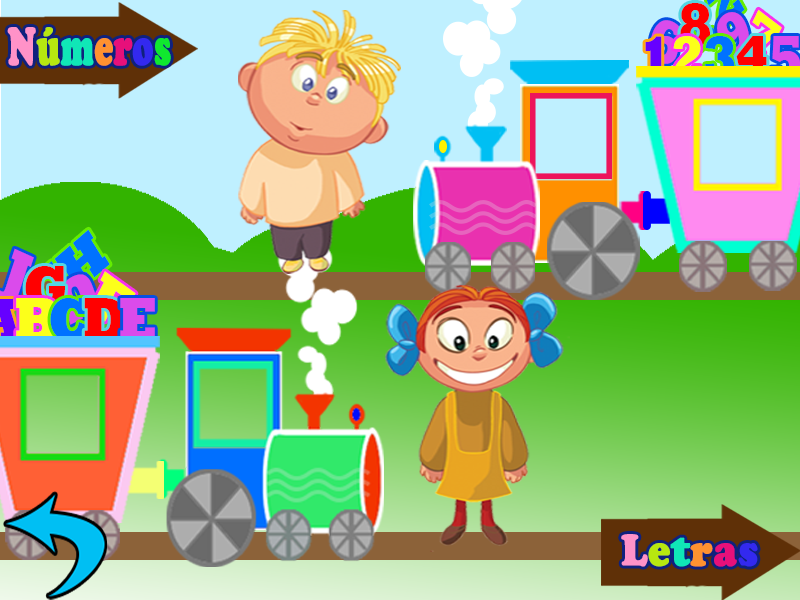
<style>
.page{position:relative;width:800px;height:600px}
.page>*{position:absolute;margin:0}
.t1{font:15px/71.1px "Rockwell-ExtraBold";letter-spacing:-0.05em;color:#ff0000;scale:0.8 1}
.t2{font:14.6px "Rockwell-ExtraBold";letter-spacing:-0.05em;scale:0.86 1}
.t3{font:14.3px "Rockwell-ExtraBold";letter-spacing:-0.05em;scale:0.9 1}
.t4{font:50.9px "CooperBlackStd";color:#ff92c8;font-weight:bold;scale:0.64 1}
.t5{font:50.9px "CooperBlackStd";color:#b7e710;font-weight:bold;scale:0.64 1}
.t6{font:50.9px "CooperBlackStd";color:#10e7b7;font-weight:bold;scale:0.64 1}
.t7{font:50.9px "CooperBlackStd";color:#ff9130;font-weight:bold;scale:0.64 1}
.t8{font:50.9px "CooperBlackStd";color:#e7107a;font-weight:bold;scale:0.64 1}
.t9{font:50.9px "CooperBlackStd";color:#3329ef;font-weight:bold;scale:0.64 1}
.t10{font:50.9px "CooperBlackStd";color:#10e72f;font-weight:bold;scale:0.64 1}
.t11{font:14.7px "Rockwell-ExtraBold";letter-spacing:-0.05em;scale:0.85 1}
.t12{font:15px/71.1px "Rockwell-ExtraBold";letter-spacing:-0.05em;scale:0.8 1}
.t13{font:14.3px "Rockwell-ExtraBold";letter-spacing:-0.05em;scale:0.95 1}
.t14{font:15.1px/71.3px "Rockwell-ExtraBold";letter-spacing:-0.05em;color:#ff0000;scale:0.85 1}
.t15{font:14.5px "Rockwell-ExtraBold";letter-spacing:-0.05em;scale:0.93 1}
.t16{font:15.1px/71.3px "Rockwell-ExtraBold";letter-spacing:-0.05em;color:#fcff1a;scale:0.85 1}
.t17{font:15.1px/71.3px "Rockwell-ExtraBold";letter-spacing:-0.05em;color:#0072ff;scale:0.85 1}
.t18{font:15.1px/71.3px "Rockwell-ExtraBold";letter-spacing:-0.05em;color:#da4beb;scale:0.85 1}
.t19{font:42.7px "CooperBlackStd";color:#ff92c8;font-weight:bold;scale:0.91 1}
.t20{font:42.7px "CooperBlackStd";color:#b7e710;font-weight:bold;scale:0.91 1}
.t21{font:42.7px "CooperBlackStd";color:#10e7b7;font-weight:bold;scale:0.91 1}
.t22{font:42.7px "CooperBlackStd";color:#ff9130;font-weight:bold;scale:0.91 1}
.t23{font:42.7px "CooperBlackStd";color:#e7107a;font-weight:bold;scale:0.91 1}
.t24{font:42.7px "CooperBlackStd";color:#3329ef;font-weight:bold;scale:0.91 1}
</style>
<div class="page">
<p class="t1" style="left:680px;top:3px;width:30px;height:43px">8</p>
<p class="t2" style="left:717px;top:12px;width:32px;height:44px;rotate:152deg">6</p>
<p class="t3" style="left:743px;top:9px;width:39px;height:52px;rotate:37deg">7</p>
<p class="t4" style="left:7px;top:27px;width:164px;height:39px">N<span class="t5">ú</span><span class="t6">m</span><span class="t7">e</span><span class="t8">r</span><span class="t9">o</span><span class="t10">s</span></p>
<p class="t11" style="left:650px;top:20px;width:32px;height:44px;rotate:26deg">6</p>
<p class="t12" style="left:645px;top:36px;width:21px;height:44px">1</p>
<p class="t12" style="left:673px;top:36px;width:28px;height:43px">2</p>
<p class="t12" style="left:705px;top:36px;width:30px;height:43px">3</p>
<p class="t1" style="left:736px;top:36px;width:31px;height:43px">4</p>
<p class="t12" style="left:771px;top:36px;width:30px;height:43px">5</p>
<p class="t13" style="left:27px;top:229px;width:83px;height:85px;rotate:-41deg">GH</p>
<p class="t14" style="left:25px;top:266px;width:40px;height:43px">G</p>
<p class="t15" style="left:86px;top:271px;width:50px;height:51px;rotate:36deg">F</p>
<p class="t16" style="left:16px;top:298px;width:42px;height:43px">B</p>
<p class="t17" style="left:50px;top:298px;width:39px;height:43px">C</p>
<p class="t14" style="left:84px;top:298px;width:42px;height:43px">D</p>
<p class="t18" style="left:120px;top:298px;width:35px;height:43px">E</p>
<p class="t19" style="left:621px;top:534px;width:137px;height:33px">L<span class="t20">e</span><span class="t21">t</span><span class="t22">r</span><span class="t23">a</span><span class="t24">s</span></p>
</div>
